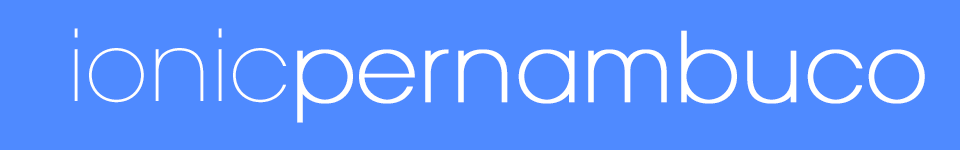
<style>
.page{position:relative;width:960px;height:150px;background:#4f8aff}
.page>*{position:absolute;margin:0}
.t1{font:94.9px "ITCAvantGardePro-XLt";color:#ffffff;font-weight:bold}
.t2{font:97.9px "ITCAvantGardePro-XLt";color:#ffffff}
</style>
<div class="page">
<p class="t1" style="left:74px;top:28px;width:851px;height:95px"><span class="t2">ionic</span>pernambuco</p>
</div>
